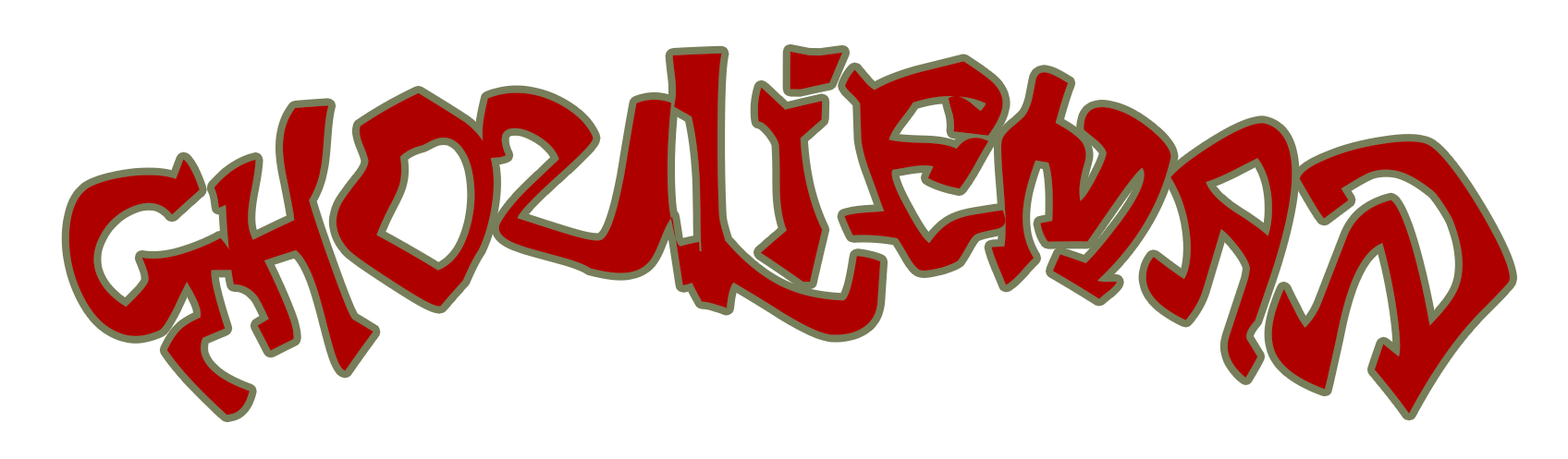
<style>
.page{position:relative;width:1568px;height:459px;background:#ffffff}
.page>*{position:absolute;margin:0}
.t1{font:212.5px "TribalFunk";color:#af0000}
</style>
<div class="page">
<p class="t1" style="left:68px;top:51px;width:1442px;height:365px;text-align:center">GhoulieMan</p>
</div>
